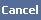
<style>
.page{position:relative;width:41px;height:20px;background:#566c99}
.page>*{position:absolute;margin:0}
.t1{font:11px "Tahoma-Bold";color:#ffffff}
</style>
<div class="page">
<p class="t1" style="left:2px;top:5px;width:36px;height:9px">Cancel</p>
</div>
